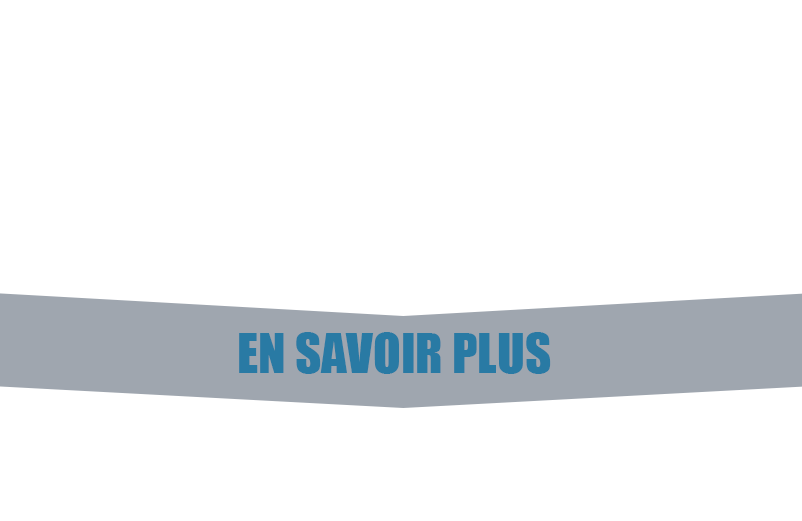
<style>
.page{position:relative;width:802px;height:521px;background:#ffffff}
.page>*{position:absolute;margin:0}
.t1{font:51px "Impact";color:#297aa4}
</style>
<div class="page">
<p class="t1" style="left:239px;top:332px;width:312px;height:42px">EN SAVOIR PLUS</p>
</div>
